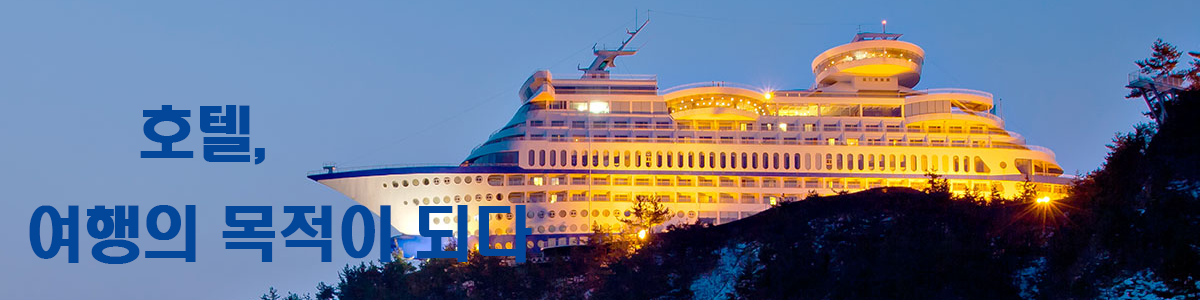
<style>
.page{position:relative;width:1200px;height:300px}
.page>*{position:absolute;margin:0}
.t1{font:60px/100px "H2hdrM";letter-spacing:-0.05em;color:#03479a;font-weight:bold}
</style>
<div class="page">
<p class="t1" style="left:29px;top:105px;width:503px;height:159px">호텔, <br>여행의 목적이 되다</p>
</div>
